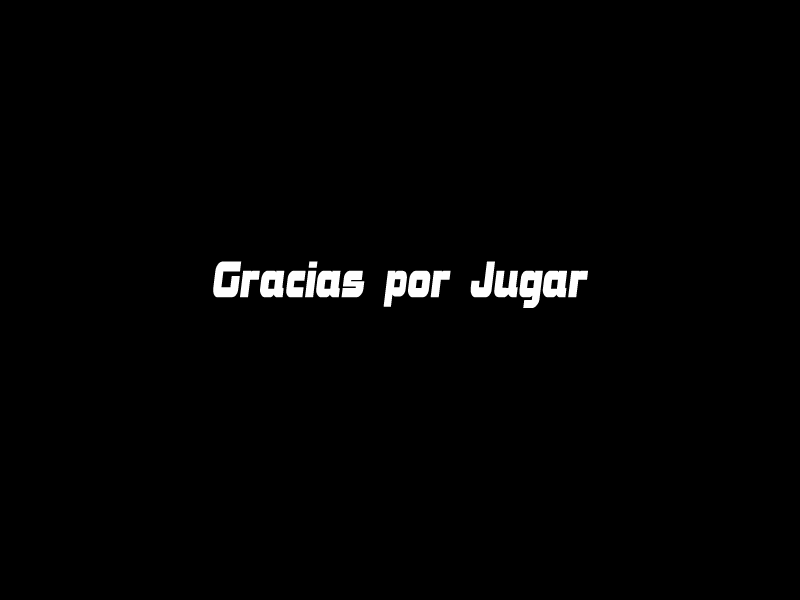
<style>
.page{position:relative;width:800px;height:600px;background:#000000}
.page>*{position:absolute;margin:0}
.t1{font:54px "BolsterBold";letter-spacing:-0.005em;color:#fefefe;font-weight:bold;font-style:italic;scale:0.69 1}
</style>
<div class="page">
<p class="t1" style="left:213px;top:261px;width:375px;height:47px">Gracias por Jugar</p>
</div>
